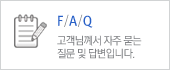
<style>
.page{position:relative;width:170px;height:70px;background:#ffffff}
.page>*{position:absolute;margin:0}
.t1{font:13px "RixGoB";color:#2860c7;scale:0.95 1}
.t2{font:13px "RixGoL";color:#808285;scale:0.95 1}
.t3{font:11px/13px "RixGoM";letter-spacing:-0.05em;color:#808285;scale:0.95 1}
</style>
<div class="page">
<p class="t1" style="left:58px;top:14px;width:35px;height:14px">F<span class="t2">/</span>A<span class="t2">/</span>Q</p>
<p class="t3" style="left:57px;top:35px;width:85px;height:24px">고객님꼐서 자주 묻는<br>질문 및 답변입니다.</p>
</div>
